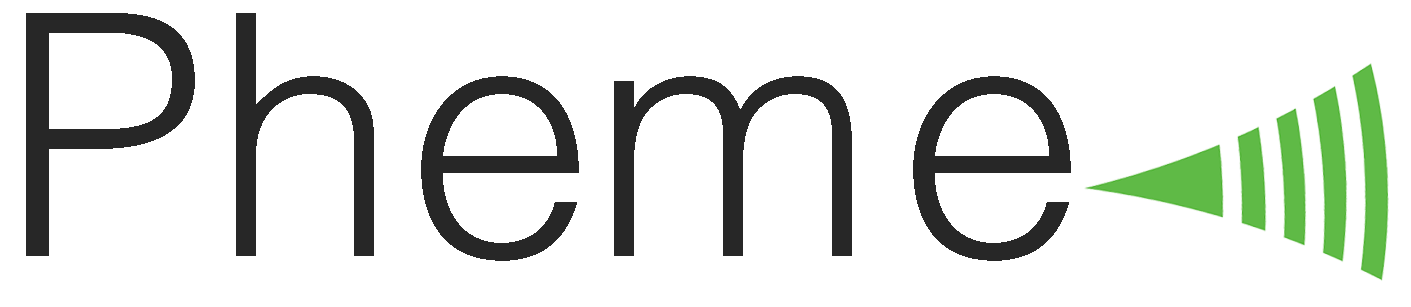
<style>
.page{position:relative;width:1411px;height:307px;background:#ffffff}
.page>*{position:absolute;margin:0}
.t1{font:338.4px "HelveticaLTStd-Light";letter-spacing:0.01em;color:#272727}
</style>
<div class="page">
<p class="t1" style="left:26px;top:13px;width:1045px;height:248px">Pheme</p>
</div>
